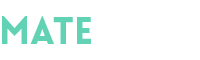
<style>
.page{position:relative;width:200px;height:60px;background:#ffffff}
.page>*{position:absolute;margin:0}
.t1{font:38px "LoveloBlack";color:#61d2b4}
</style>
<div class="page">
<p class="t1" style="left:2px;top:16px;width:89px;height:28px">Mate</p>
</div>
